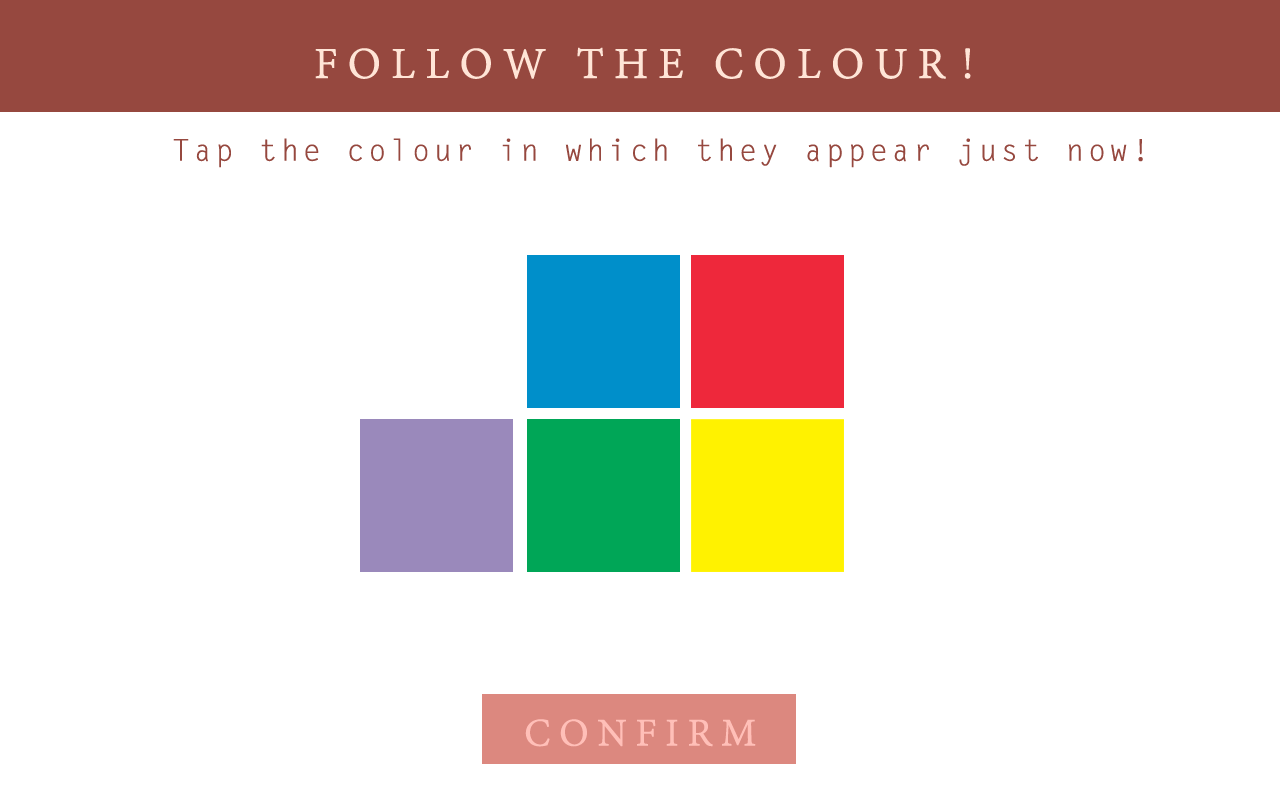
<style>
.page{position:relative;width:1280px;height:800px;background:#ffffff}
.page>*{position:absolute;margin:0}
.t1{font:48px "AdobeDevanagari-Regular";letter-spacing:0.2em;color:#ffe5d7;text-transform:uppercase;font-weight:bold}
.t2{font:30px "LetterGothicStd";letter-spacing:0.1em;color:#96483f;font-weight:bold}
.t3{font:42.3px "AdobeDevanagari-Regular";letter-spacing:0.2em;color:#ffbfb8;text-transform:uppercase;font-weight:bold}
</style>
<div class="page">
<p class="t1" style="left:315px;top:47px;width:656px;height:32px">Follow the Colour!</p>
<p class="t2" style="left:173px;top:138px;width:970px;height:30px">Tap the colour in which they appear just now!</p>
<p class="t3" style="left:525px;top:719px;width:231px;height:28px">Confirm</p>
</div>
